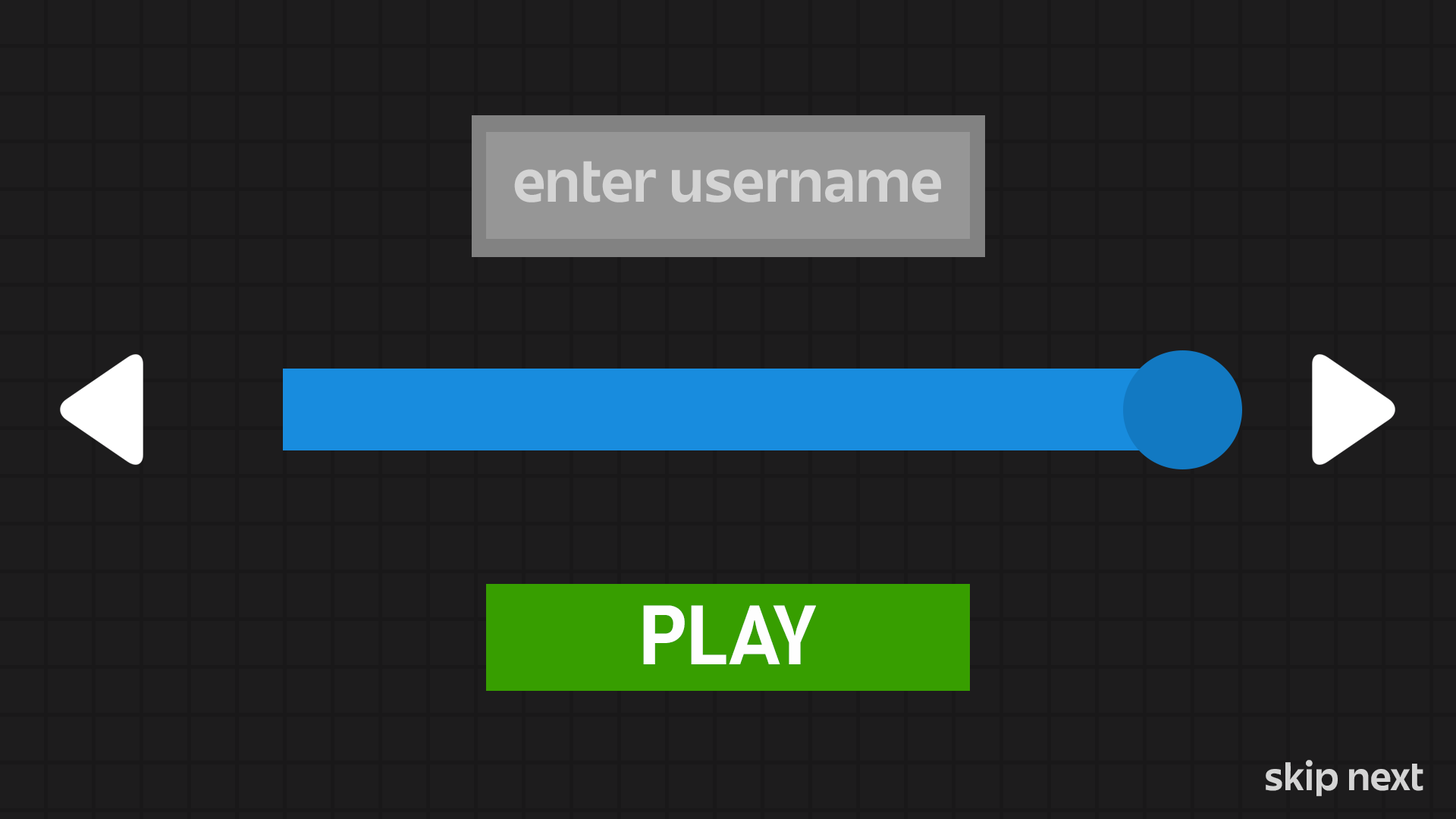
<style>
.page{position:relative;width:1456px;height:819px;background:#1d1c1d}
.page>*{position:absolute;margin:0}
.t1{font:53.2px "JuneExptVariable-Active";color:#d4d4d4}
.t2{font:73.5px "JuneExptVariable-Active";color:#fefefe}
.t3{font:34.9px "JuneExptVariable-Active";color:#d4d4d4}
</style>
<div class="page">
<p class="t1" style="left:514px;top:161px;width:427px;height:41px">enter username</p>
<p class="t2" style="left:643px;top:605px;width:173px;height:59px">PLAY</p>
<p class="t3" style="left:1266px;top:760px;width:157px;height:36px">skip next</p>
</div>
